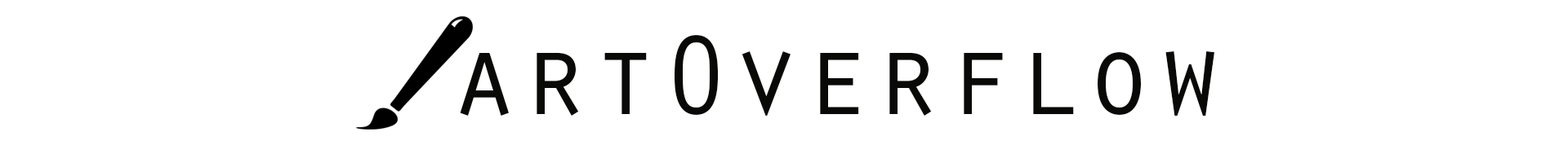
<style>
.page{position:relative;width:1568px;height:145px;background:#ffffff}
.page>*{position:absolute;margin:0}
.t1{font:117.7px "OratorStd";color:#090908}
</style>
<div class="page">
<p class="t1" style="left:460px;top:35px;width:754px;height:81px">artOverflow</p>
</div>
